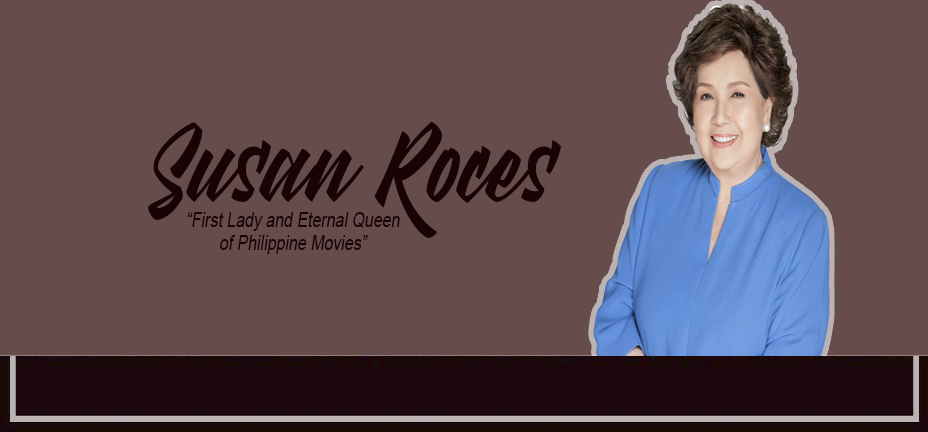
<style>
.page{position:relative;width:928px;height:432px;background:#674c4c}
.page>*{position:absolute;margin:0}
.t1{font:133px "MeatBuckets";color:#180305;scale:0.81 1}
.t2{font:19.7px "ArialMT";color:#180305;font-style:italic;scale:0.81 1}
</style>
<div class="page">
<p class="t1" style="left:148px;top:121px;width:413px;height:118px">Susan Roces</p>
<p class="t2" style="left:187px;top:212px;width:213px;height:42px;text-align:center">“First Lady and Eternal Queen<br>of Philippine Movies”</p>
</div>
